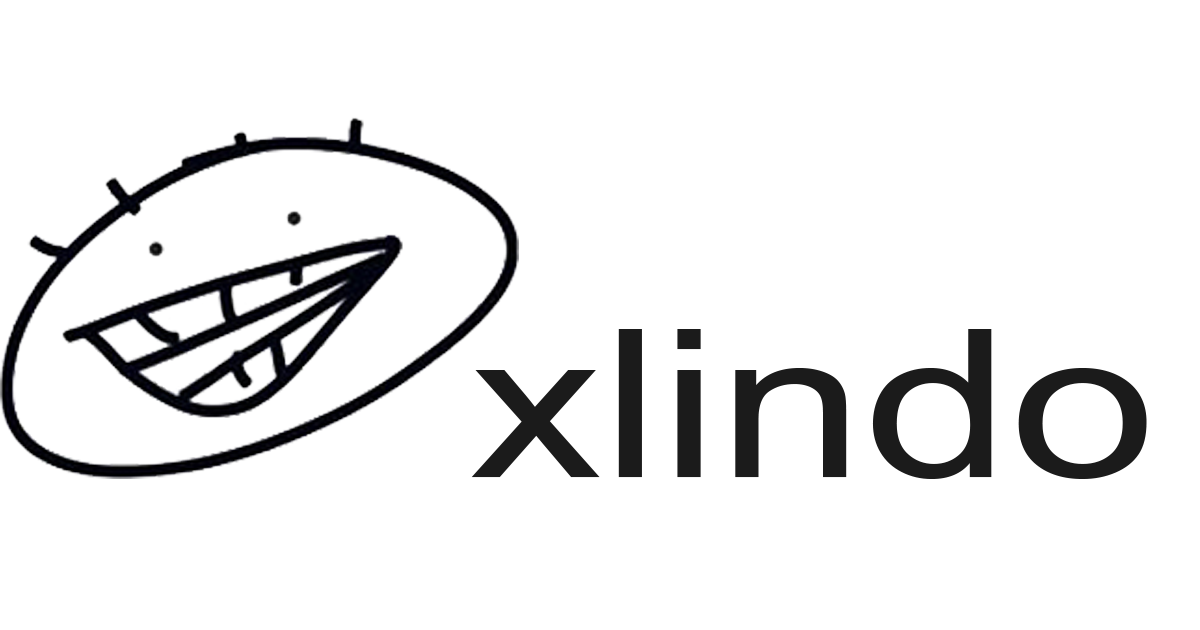
<style>
.page{position:relative;width:1200px;height:630px;background:#ffffff}
.page>*{position:absolute;margin:0}
.t1{font:205.8px "ArialMT";color:#1b1b1b;scale:1.28 1}
</style>
<div class="page">
<p class="t1" style="left:471px;top:329px;width:676px;height:150px">xlindo</p>
</div>
